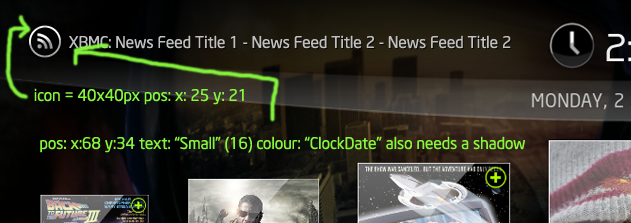
<style>
.page{position:relative;width:631px;height:223px}
.page>*{position:absolute;margin:0}
.t1{font:16px "NeoSansIntel";color:#c0c0c0}
.t2{font:16px "NeoSansIntel";color:#86f63c}
</style>
<div class="page">
<p class="t1" style="left:69px;top:35px;width:442px;height:14px">XBMC: News Feed Title 1 - News Feed Title 2 - News Feed Title 2</p>
<p class="t2" style="left:34px;top:88px;width:210px;height:17px">icon = 40x40px pos: x: 25 y: 21</p>
<p class="t2" style="left:40px;top:136px;width:485px;height:17px">pos: x:68 y:34 text: “Small” (16) colour: “ClockDate” also needs a shadow</p>
</div>
